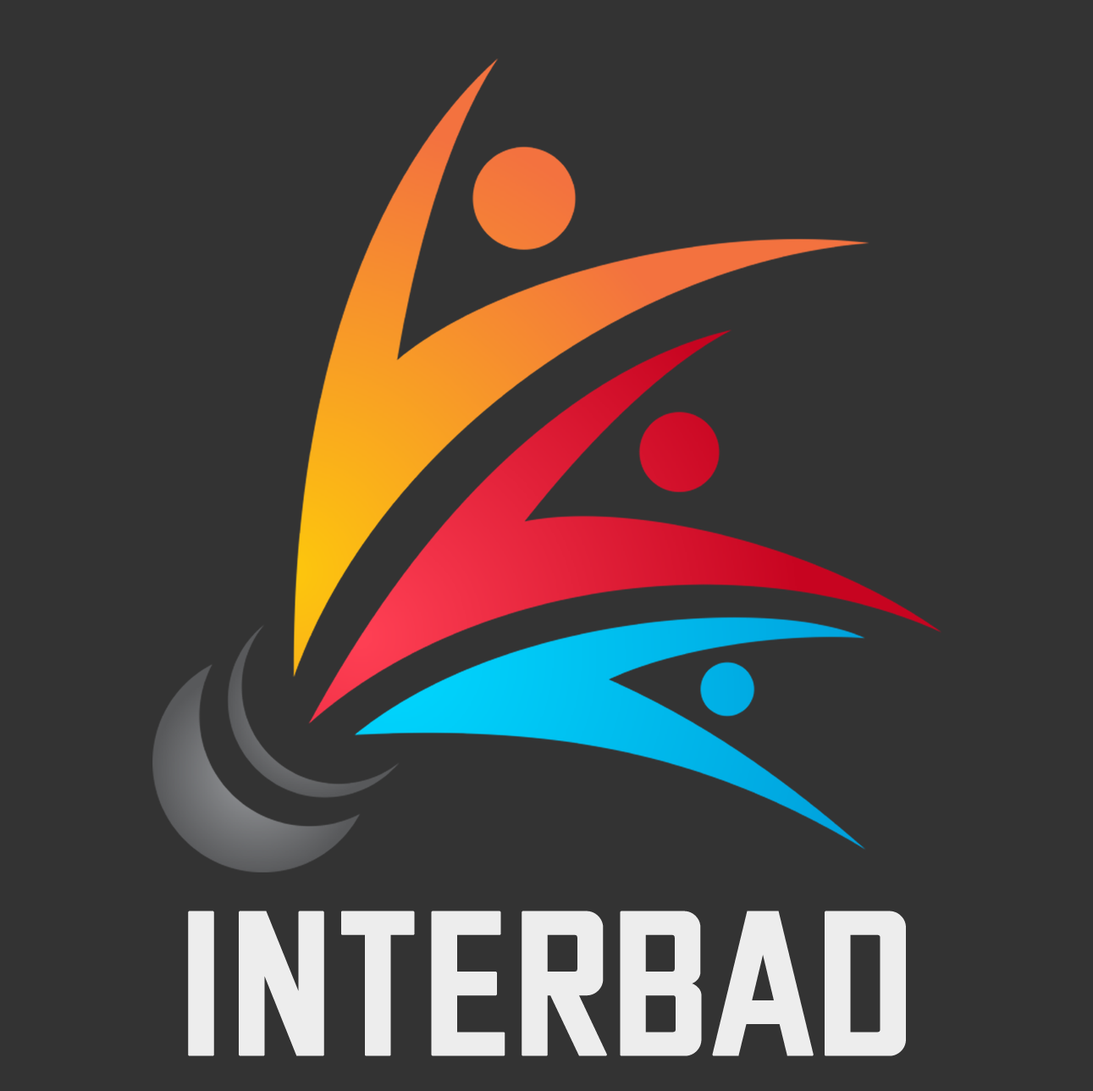
<style>
.page{position:relative;width:1093px;height:1091px;background:#333333}
.page>*{position:absolute;margin:0}
.t1{font:254px "AireExterior";color:#ededed;font-weight:bold}
</style>
<div class="page">
<p class="t1" style="left:188px;top:910px;width:718px;height:146px">INTERBAD</p>
</div>
